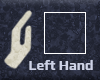
<style>
.page{position:relative;width:100px;height:80px}
.page>*{position:absolute;margin:0}
.t1{font:14px "Play-Bold";color:#ced3e7}
</style>
<div class="page">
<p class="t1" style="left:29px;top:60px;width:64px;height:10px">Left Hand</p>
</div>
